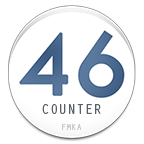
<style>
.page{position:relative;width:144px;height:144px;background:#ffffff}
.page>*{position:absolute;margin:0}
.t1{font:14.4px "OratorStd";color:#596068}
.t2{font:8.6px "OratorStd";color:#c9c9c9}
</style>
<div class="page">
<p class="t1" style="left:42px;top:104px;width:59px;height:10px">COUNTER</p>
<p class="t2" style="left:62px;top:124px;width:19px;height:6px">FMKA</p>
</div>
